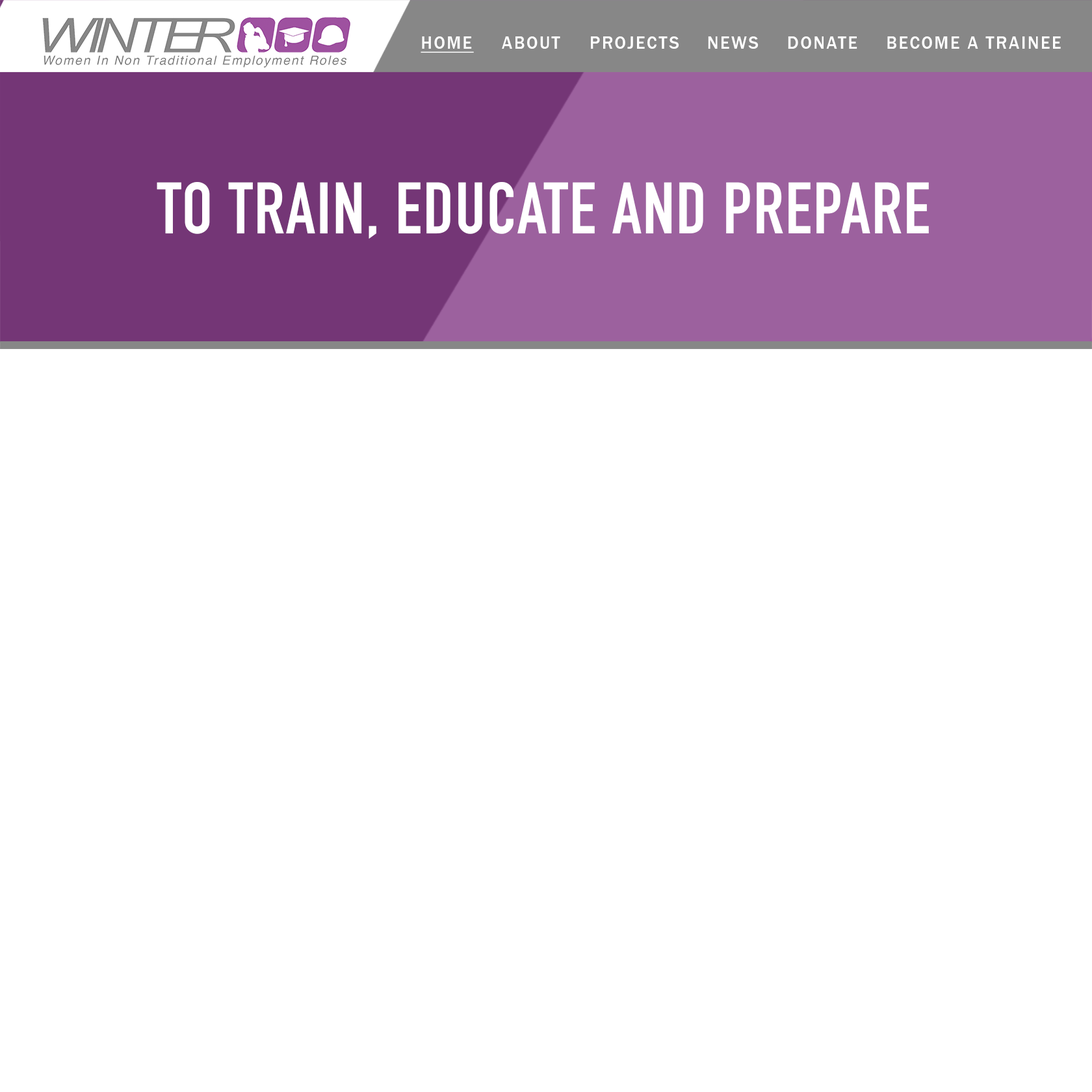
<style>
.page{position:relative;width:1092px;height:1092px;background:#ffffff}
.page>*{position:absolute;margin:0}
.t1{font:17.9px "FranklinGothic-Medium";letter-spacing:0.1em;color:#ffffff;text-transform:uppercase;text-decoration:underline}
.t2{font:17.9px "FranklinGothic-Medium";letter-spacing:0.1em;color:#ffffff;text-transform:uppercase}
.t3{font:71.6px "DINCondensed-Bold";letter-spacing:0.02em;color:#ffffff;text-transform:uppercase}
</style>
<div class="page">
<p class="t1" style="left:421px;top:36px;width:53px;height:17px">Home</p>
<p class="t2" style="left:502px;top:36px;width:58px;height:13px">About</p>
<p class="t2" style="left:591px;top:36px;width:88px;height:13px">Projects</p>
<p class="t2" style="left:708px;top:36px;width:51px;height:13px">NEWS</p>
<p class="t2" style="left:788px;top:36px;width:69px;height:13px">Donate</p>
<p class="t2" style="left:887px;top:36px;width:174px;height:13px">Become a trainee</p>
<p class="t3" style="left:157px;top:182px;width:772px;height:57px">To train, Educate and prepare</p>
</div>
